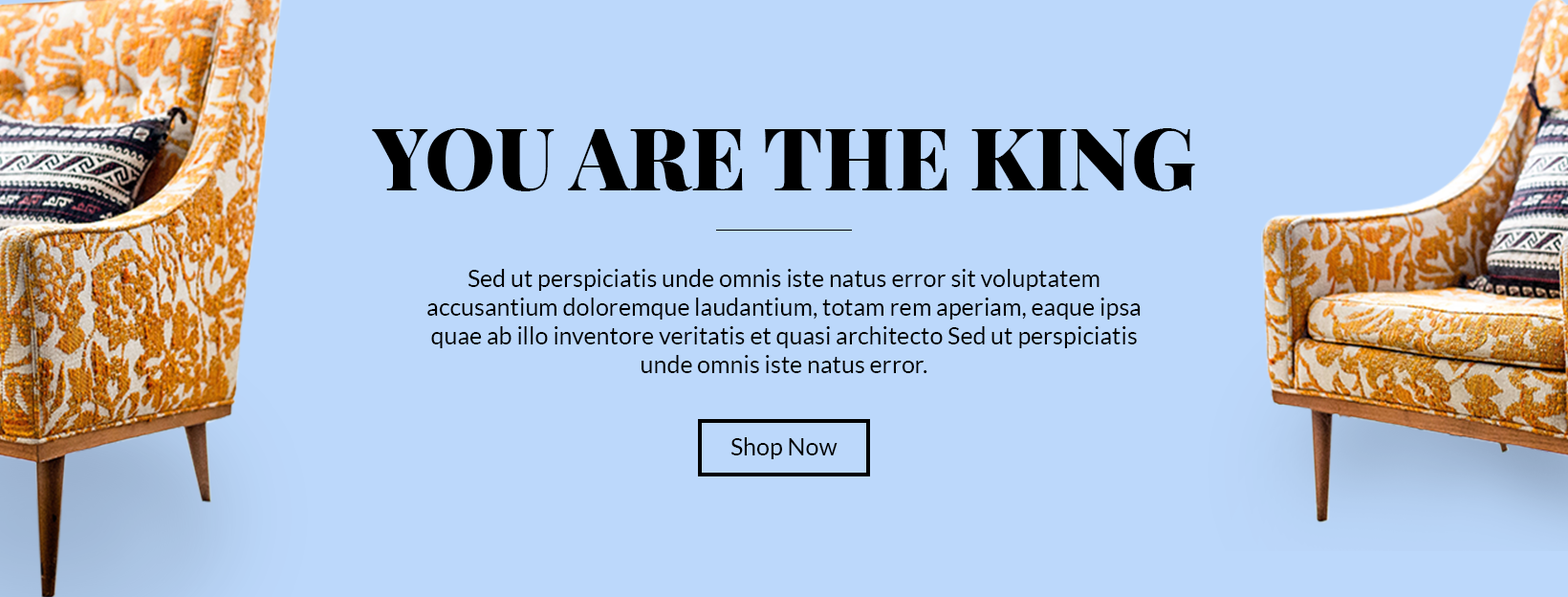
<style>
.page{position:relative;width:1568px;height:597px;background:#bcd8fb}
.page>*{position:absolute;margin:0}
.t1{font:86px "PlayfairDisplay-Black";color:#000000;text-transform:uppercase}
.t2{font:23.9px/28.7px "Lato-Regular";color:#000000}
.t3{font:23.9px "Lato-Regular";color:#000000}
</style>
<div class="page">
<p class="t1" style="left:372px;top:128px;width:823px;height:63px">You are The King</p>
<p class="t2" style="left:427px;top:269px;width:714px;height:104px;text-align:center">Sed ut perspiciatis unde omnis iste natus error sit voluptatem accusantium doloremque laudantium, totam rem aperiam, eaque ipsa quae ab illo inventore veritatis et quasi architecto Sed ut perspiciatis unde omnis iste natus error.</p>
<p class="t3" style="left:730px;top:437px;width:108px;height:22px">Shop Now</p>
</div>
